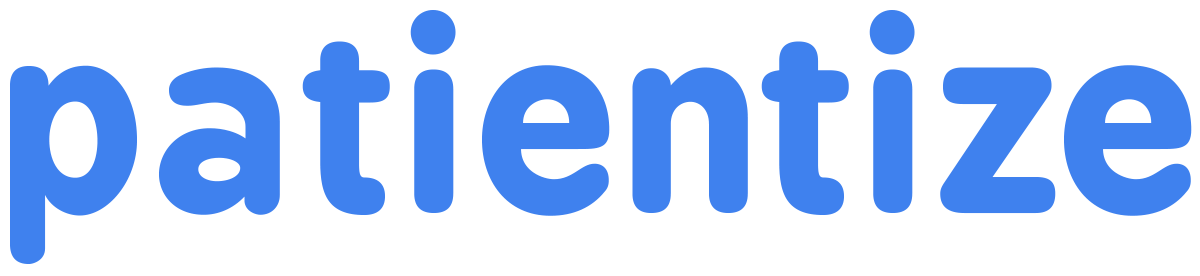
<style>
.page{position:relative;width:1200px;height:276px;background:#ffffff}
.page>*{position:absolute;margin:0}
.t1{font:250px "BPreplay-Bold";letter-spacing:0.025em;color:#3f81ee}
</style>
<div class="page">
<p class="t1" style="left:10px;top:10px;width:1182px;height:254px">patientize</p>
</div>
